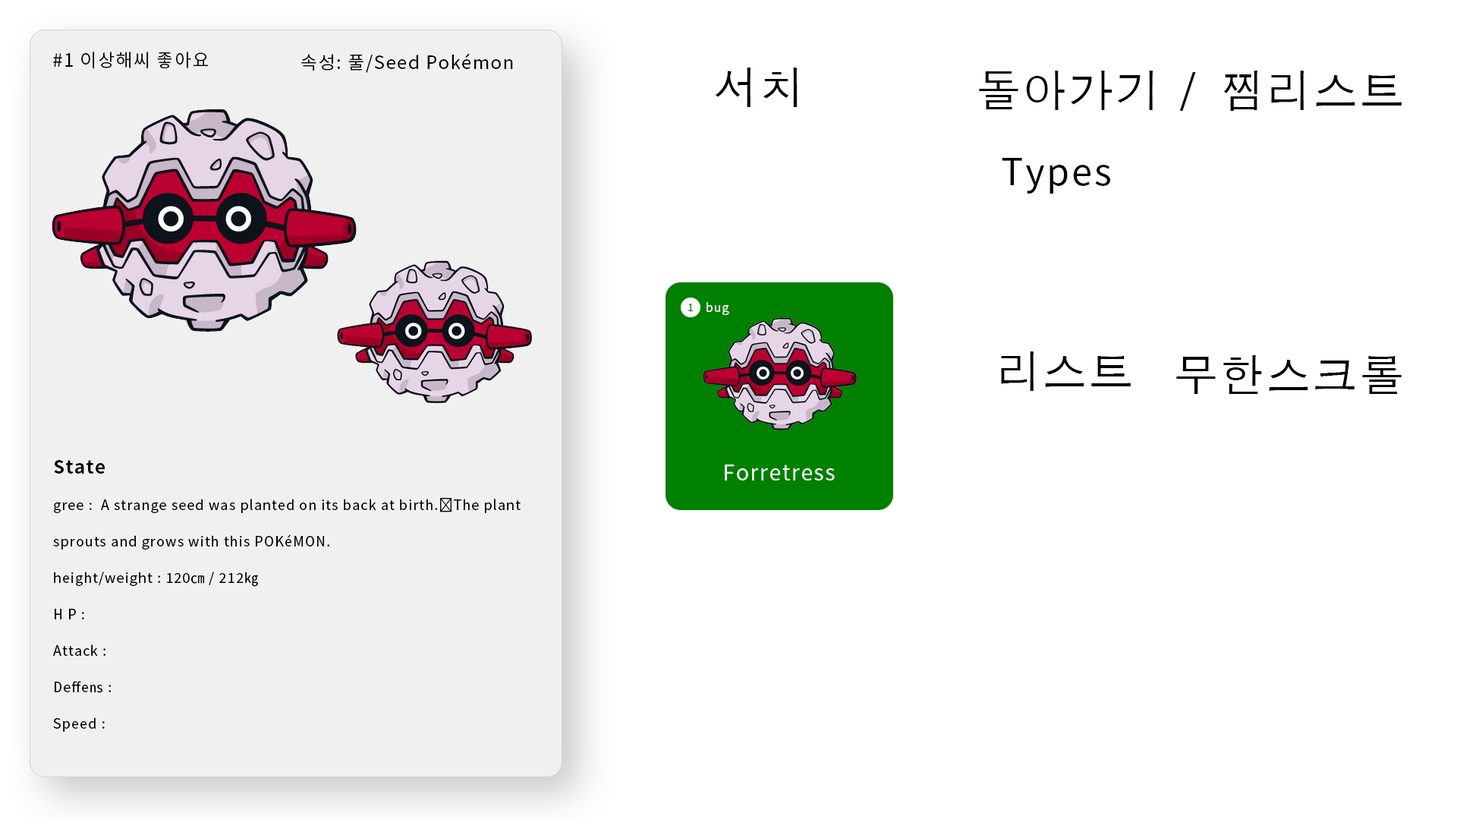
<style>
.page{position:relative;width:1457px;height:819px;background:#ffffff}
.page>*{position:absolute;margin:0}
.t1{font:18.2px "NotoSansCJKkr-Regular";letter-spacing:0.06em;color:#000000}
.t2{font:43.9px "AppleGothic";letter-spacing:0.06em;color:#000000}
.t3{font:36.9px "NotoSansCJKkr-Regular";letter-spacing:0.06em;color:#000000}
.t4{font:10.5px "NotoSansCJKkr-Regular";letter-spacing:0.06em;color:#008000}
.t5{font:12.1px "NotoSansCJKkr-Regular";letter-spacing:0.06em;color:#ffffff}
.t6{font:13.7px/36.4px "NotoSansCJKkr-Regular";letter-spacing:0.06em;color:#000000}
.t7{font:18.2px/29.6px "NotoSansCJKkr-Bold";letter-spacing:0.06em;color:#000000}
.t8{font:21.2px "NotoSansCJKkr-Regular";letter-spacing:0.06em;color:#ffffff}
</style>
<div class="page">
<p class="t1" style="left:53px;top:52px;width:155px;height:16px">#1 이상해씨 좋아요</p>
<p class="t1" style="left:301px;top:53px;width:212px;height:20px">속성: 풀/Seed Pokémon</p>
<p class="t2" style="left:715px;top:68px;width:82px;height:39px">서치</p>
<p class="t2" style="left:979px;top:71px;width:422px;height:40px">돌아가기 / 찜리스트</p>
<p class="t3" style="left:1001px;top:158px;width:109px;height:35px">Types</p>
<p class="t4" style="left:688px;top:303px;width:5px;height:8px">1</p>
<p class="t5" style="left:706px;top:302px;width:23px;height:13px">bug</p>
<p class="t2" style="left:1001px;top:351px;width:129px;height:40px">리스트</p>
<p class="t2" style="left:1176px;top:355px;width:225px;height:39px">무한스크롤</p>
<p class="t6" style="left:53px;top:460px;width:467px;height:271px"><span class="t7">State<br></span>gree :  A strange seed was planted on its back at birth.The plant sprouts and grows with this POKéMON.<br>height/weight : 120cm / 212kg<br>H P :<br>Attack : <br>Deffens : <br>Speed :</p>
<p class="t8" style="left:725px;top:464px;width:110px;height:16px">Forretress</p>
</div>
